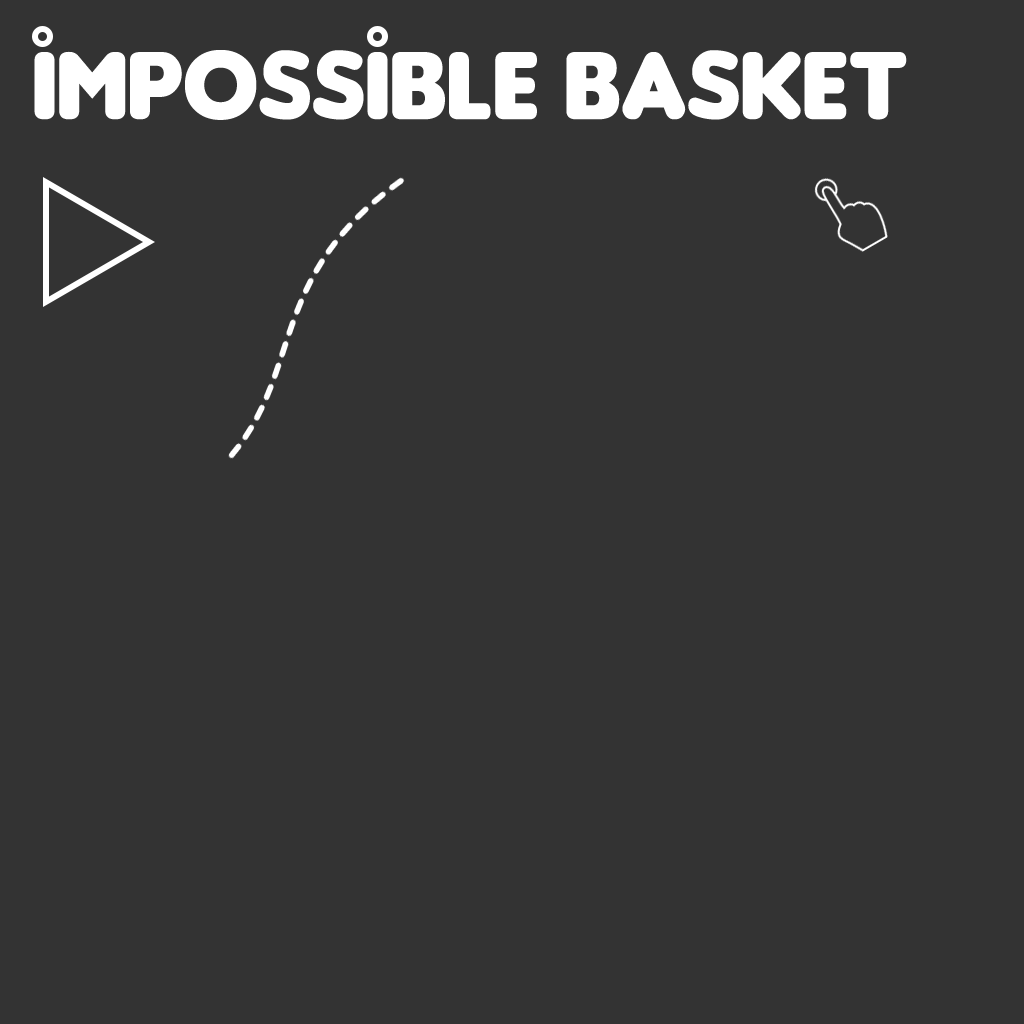
<style>
.page{position:relative;width:1024px;height:1024px;background:#333333}
.page>*{position:absolute;margin:0}
.t1{font:102px "Insaniburger";color:#ffffff}
</style>
<div class="page">
<p class="t1" style="left:34px;top:50px;width:873px;height:70px">Impossible BaskeT</p>
</div>
